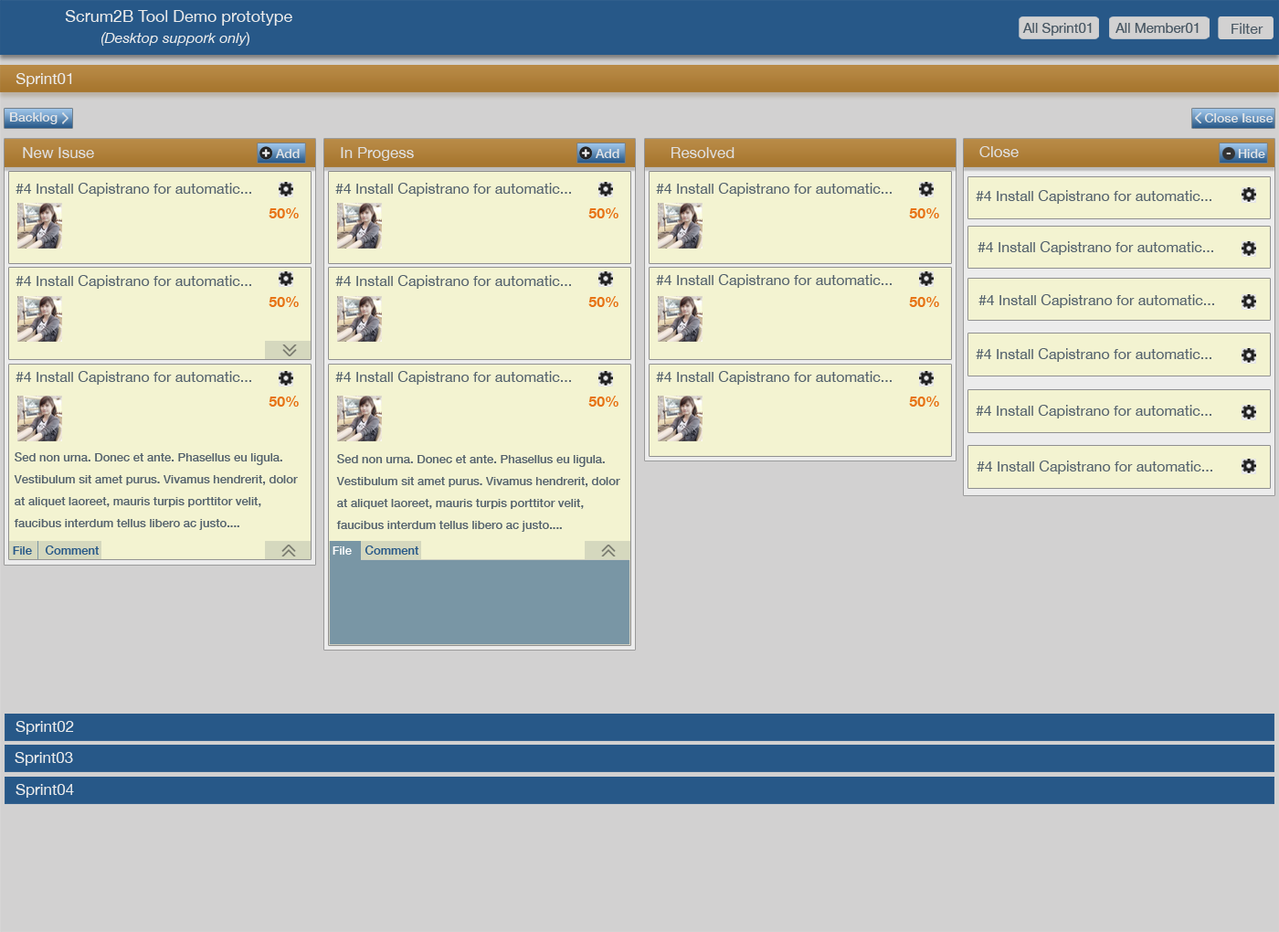
<style>
.page{position:relative;width:1279px;height:932px;background:#d2d1d1}
.page>*{position:absolute;margin:0}
.t1{font:16.4px "HelveticaNeue";color:#ebebeb}
.t2{font:13.7px "HelveticaNeue";color:#495864}
.t3{font:14.6px "HelveticaNeue";color:#495864}
.t4{font:14.6px "HelveticaNeue-Italic";color:#ebebeb}
.t5{font:14.6px "HelveticaNeue";color:#ebebeb}
.t6{font:15.5px "HelveticaNeue";color:#ebebeb}
.t7{font:12.8px "HelveticaNeue-Medium";color:#e1e4e7}
.t8{font:15.5px "HelveticaNeue";color:#dfdfdf}
.t9{font:12.8px "HelveticaNeue-Bold";color:#d2d1d1}
.t10{font:14.6px "HelveticaNeue";color:#54626d}
.t11{font:14.6px "HelveticaNeue-Bold";color:#e77315}
.t12{font:11.9px/21.9px "HelveticaNeue-Medium";color:#54626d}
.t13{font:11.9px "HelveticaNeue-Medium";color:#275888}
.t14{font:11.9px "HelveticaNeue-Medium";color:#ffffff}
</style>
<div class="page">
<p class="t1" style="left:65px;top:10px;width:227px;height:16px">Scrum2B Tool Demo prototype</p>
<p class="t2" style="left:1023px;top:23px;width:69px;height:13px">All Sprint01</p>
<p class="t2" style="left:1116px;top:23px;width:83px;height:10px">All Member01</p>
<p class="t3" style="left:1232px;top:23px;width:32px;height:11px">Filter</p>
<p class="t4" style="left:101px;top:32px;width:148px;height:14px">(Desktop suppork only<span class="t5">)</span></p>
<p class="t6" style="left:16px;top:73px;width:56px;height:14px">Sprint01</p>
<p class="t7" style="left:9px;top:112px;width:49px;height:12px">Backlog</p>
<p class="t7" style="left:1204px;top:113px;width:70px;height:9px">Close Isuse</p>
<p class="t8" style="left:23px;top:147px;width:71px;height:11px">New Isuse</p>
<p class="t7" style="left:275px;top:149px;width:25px;height:9px">Add</p>
<p class="t8" style="left:341px;top:147px;width:73px;height:14px">In Progess</p>
<p class="t7" style="left:595px;top:149px;width:25px;height:9px">Add</p>
<p class="t8" style="left:672px;top:147px;width:63px;height:11px">Resolved</p>
<p class="t8" style="left:980px;top:146px;width:39px;height:11px">Close</p>
<p class="t7" style="left:1238px;top:149px;width:28px;height:9px">Hide</p>
<p class="t9" style="left:1226px;top:153px;width:6px;height:1px">-</p>
<p class="t10" style="left:16px;top:183px;width:235px;height:13px">#4 Install Capistrano for automatic...</p>
<p class="t10" style="left:335px;top:183px;width:236px;height:13px">#4 Install Capistrano for automatic...</p>
<p class="t10" style="left:656px;top:183px;width:236px;height:13px">#4 Install Capistrano for automatic...</p>
<p class="t10" style="left:976px;top:190px;width:236px;height:14px">#4 Install Capistrano for automatic...</p>
<p class="t11" style="left:269px;top:207px;width:30px;height:11px">50%</p>
<p class="t11" style="left:588px;top:207px;width:31px;height:11px">50%</p>
<p class="t11" style="left:909px;top:207px;width:30px;height:11px">50%</p>
<p class="t10" style="left:978px;top:241px;width:236px;height:14px">#4 Install Capistrano for automatic...</p>
<p class="t10" style="left:16px;top:275px;width:235px;height:14px">#4 Install Capistrano for automatic...</p>
<p class="t10" style="left:335px;top:275px;width:236px;height:14px">#4 Install Capistrano for automatic...</p>
<p class="t10" style="left:656px;top:274px;width:236px;height:14px">#4 Install Capistrano for automatic...</p>
<p class="t11" style="left:269px;top:296px;width:30px;height:11px">50%</p>
<p class="t11" style="left:588px;top:296px;width:31px;height:11px">50%</p>
<p class="t11" style="left:909px;top:296px;width:30px;height:11px">50%</p>
<p class="t10" style="left:979px;top:294px;width:235px;height:14px">#4 Install Capistrano for automatic...</p>
<p class="t10" style="left:976px;top:348px;width:236px;height:14px">#4 Install Capistrano for automatic...</p>
<p class="t10" style="left:16px;top:371px;width:235px;height:14px">#4 Install Capistrano for automatic...</p>
<p class="t10" style="left:335px;top:371px;width:236px;height:14px">#4 Install Capistrano for automatic...</p>
<p class="t10" style="left:656px;top:371px;width:236px;height:14px">#4 Install Capistrano for automatic...</p>
<p class="t11" style="left:269px;top:396px;width:30px;height:11px">50%</p>
<p class="t11" style="left:588px;top:396px;width:31px;height:11px">50%</p>
<p class="t11" style="left:909px;top:396px;width:30px;height:11px">50%</p>
<p class="t10" style="left:976px;top:405px;width:236px;height:14px">#4 Install Capistrano for automatic...</p>
<p class="t12" style="left:14px;top:452px;width:284px;height:78px">Sed non urna. Donec et ante. Phasellus eu ligula. <br>Vestibulum sit amet purus. Vivamus hendrerit, dolor <br>at aliquet laoreet, mauris turpis porttitor velit, <br>faucibus interdum tellus libero ac justo....</p>
<p class="t12" style="left:336px;top:454px;width:284px;height:78px">Sed non urna. Donec et ante. Phasellus eu ligula. <br>Vestibulum sit amet purus. Vivamus hendrerit, dolor <br>at aliquet laoreet, mauris turpis porttitor velit, <br>faucibus interdum tellus libero ac justo....</p>
<p class="t10" style="left:977px;top:461px;width:236px;height:13px">#4 Install Capistrano for automatic...</p>
<p class="t13" style="left:45px;top:546px;width:55px;height:9px">Comment</p>
<p class="t13" style="left:365px;top:546px;width:54px;height:9px">Comment</p>
<p class="t13" style="left:13px;top:546px;width:19px;height:9px">File</p>
<p class="t14" style="left:333px;top:546px;width:19px;height:9px">File</p>
<p class="t6" style="left:16px;top:721px;width:58px;height:14px">Sprint02</p>
<p class="t6" style="left:15px;top:752px;width:58px;height:14px">Sprint03</p>
<p class="t6" style="left:16px;top:784px;width:58px;height:14px">Sprint04</p>
</div>
